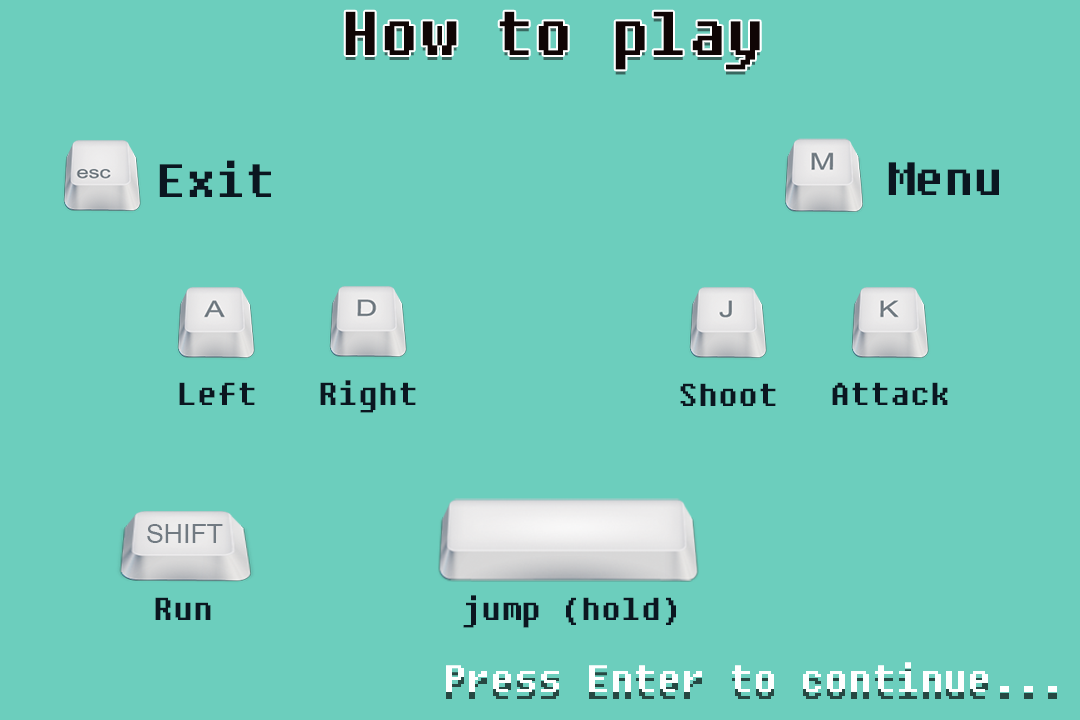
<style>
.page{position:relative;width:1080px;height:720px;background:#6ccebd}
.page>*{position:absolute;margin:0}
.t1{font:77px "FixedsysExcelsiorIIIb";color:#100505}
.t2{font:58.3px "FixedsysExcelsiorIIIb";color:#0b1620}
.t3{font:39.4px "FixedsysExcelsiorIIIb";color:#0b1620}
.t4{font:47.7px "FixedsysExcelsiorIIIb";color:#ffffff}
</style>
<div class="page">
<p class="t1" style="left:345px;top:11px;width:415px;height:59px">How to play</p>
<p class="t2" style="left:159px;top:160px;width:112px;height:37px">Exit</p>
<p class="t2" style="left:888px;top:162px;width:111px;height:33px">Menu</p>
<p class="t3" style="left:179px;top:382px;width:76px;height:23px">Left</p>
<p class="t3" style="left:320px;top:380px;width:96px;height:33px">Right</p>
<p class="t3" style="left:680px;top:383px;width:96px;height:23px">Shoot</p>
<p class="t3" style="left:832px;top:382px;width:116px;height:23px">Attack</p>
<p class="t3" style="left:155px;top:597px;width:56px;height:23px">Run</p>
<p class="t3" style="left:463px;top:595px;width:213px;height:33px">jump (hold)</p>
<p class="t4" style="left:446px;top:662px;width:611px;height:30px">Press Enter to continue...</p>
</div>
